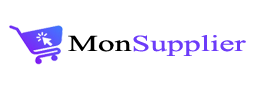
<style>
.page{position:relative;width:253px;height:90px;background:#ffffff}
.page>*{position:absolute;margin:0}
.t1{font:22.9px "TimesNewRomanPSMT";color:#6c3bf9;scale:1.47 1}
.t2{font:22.9px "TimesNewRomanPSMT";color:#000000;scale:1.47 1}
</style>
<div class="page">
<p class="t1" style="left:68px;top:35px;width:178px;height:21px"><span class="t2">Mon</span>Supplier</p>
</div>
